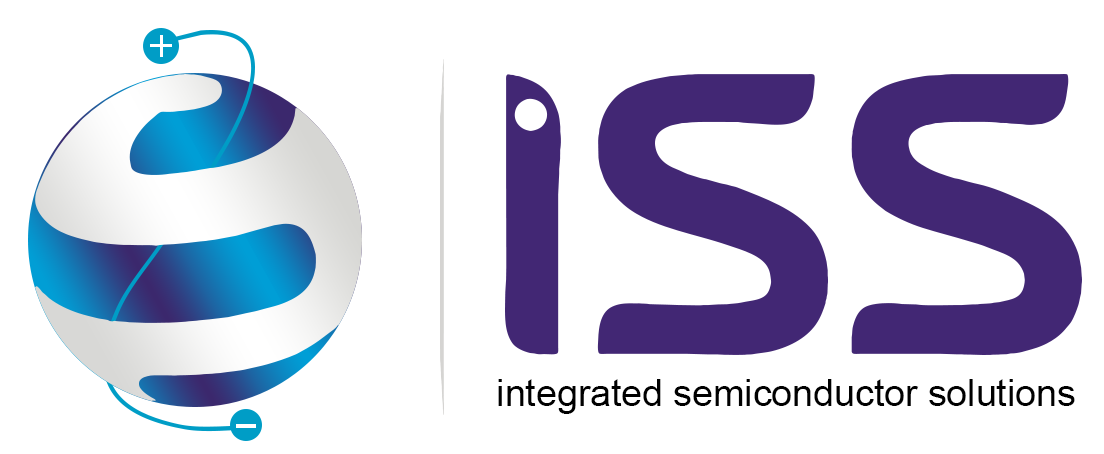
<style>
.page{position:relative;width:1104px;height:454px;background:#ffffff}
.page>*{position:absolute;margin:0}
.t1{font:37.5px "ArialMT";color:#000000}
</style>
<div class="page">
<p class="t1" style="left:498px;top:379px;width:577px;height:35px">integrated semiconductor solutions</p>
</div>
